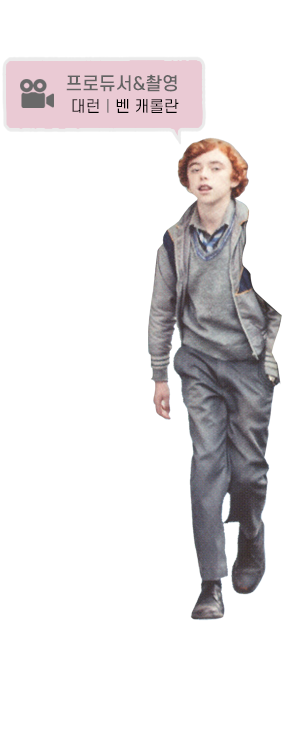
<style>
.page{position:relative;width:289px;height:732px;background:#ffffff}
.page>*{position:absolute;margin:0}
.t1{font:17.5px "S-CoreDream-5Medium";color:#636363}
.t2{font:15.4px "S-CoreDream-4Regular";color:#000000}
.t3{font:15.4px "S-CoreDream-4Regular";color:#636363}
</style>
<div class="page">
<p class="t1" style="left:66px;top:74px;width:111px;height:18px">프로듀서&amp;촬영</p>
<p class="t2" style="left:72px;top:99px;width:107px;height:14px">대런<span class="t3">ㅣ</span>벤 캐롤란</p>
</div>
